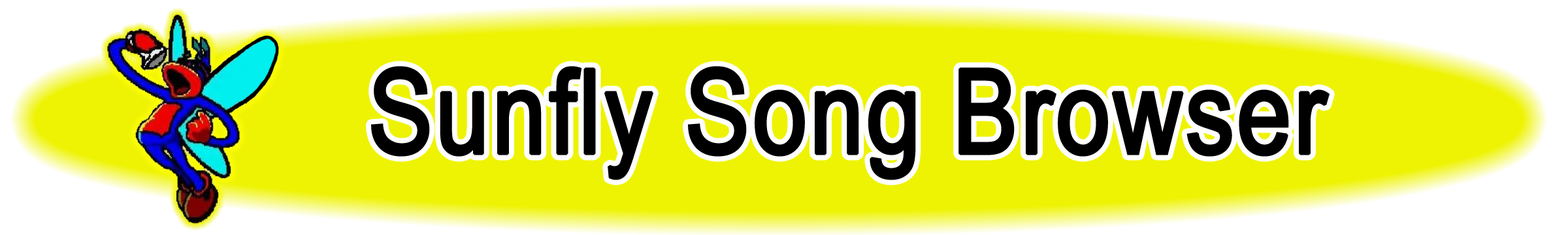
<style>
.page{position:relative;width:1568px;height:235px;background:#eef303}
.page>*{position:absolute;margin:0}
.t1{font:117.6px "ArialNarrow";color:#000000;font-weight:bold}
</style>
<div class="page">
<p class="t1" style="left:371px;top:66px;width:959px;height:114px">Sunfly Song Browser</p>
</div>
